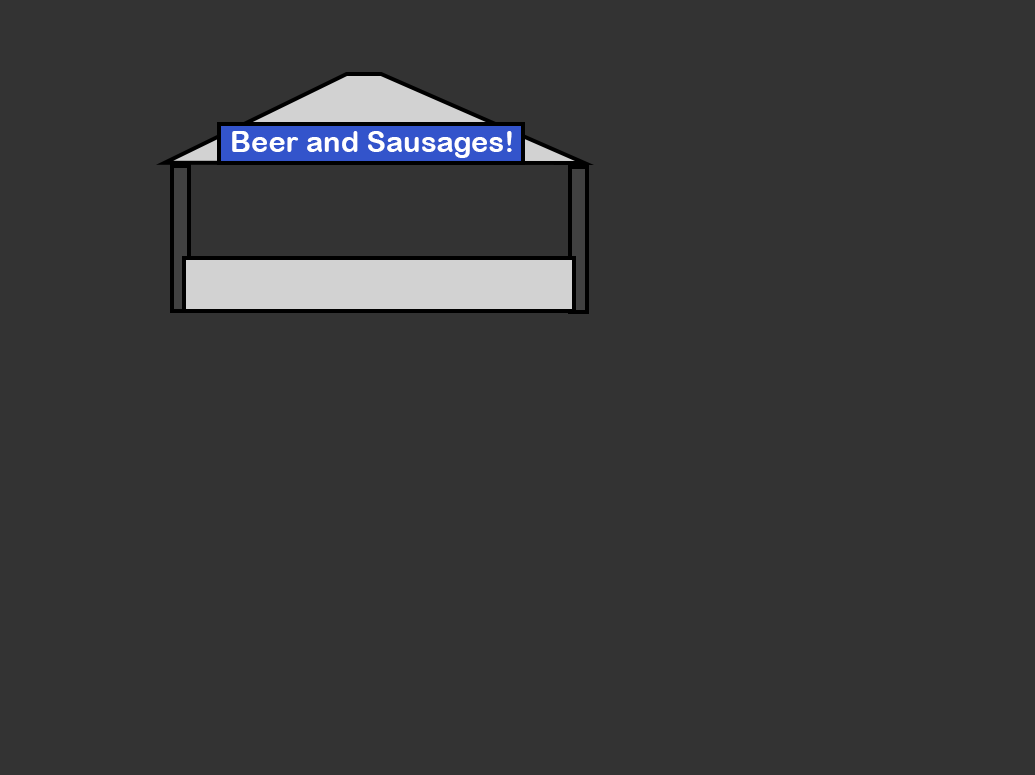
<style>
.page{position:relative;width:1035px;height:775px;background:#333333}
.page>*{position:absolute;margin:0}
.t1{font:29.2px "ArialRoundedMTBold";color:#ffffff}
</style>
<div class="page">
<p class="t1" style="left:232px;top:131px;width:280px;height:27px">Beer and Sausages!</p>
</div>
